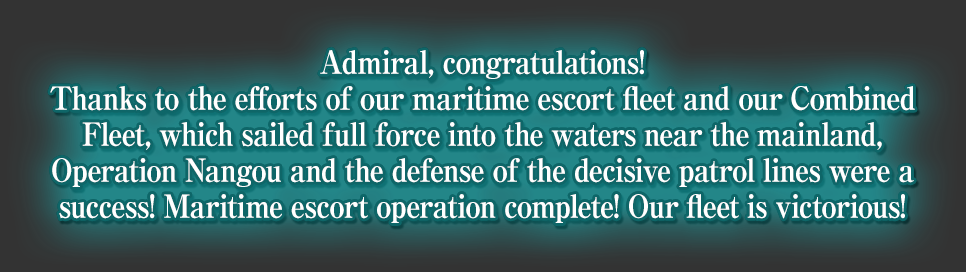
<style>
.page{position:relative;width:966px;height:272px}
.page>*{position:absolute;margin:0}
.t1{font:32px/36px "RyuminPro-ExBold";letter-spacing:-0.04em;color:#ffffff;scale:0.9 1}
</style>
<div class="page">
<p class="t1" style="left:50px;top:50px;width:865px;height:173px;text-align:center">Admiral, congratulations!<br>Thanks to the efforts of our maritime escort fleet and our Combined<br>Fleet, which sailed full force into the waters near the mainland,<br>Operation Nangou and the defense of the decisive patrol lines were a<br>success! Maritime escort operation complete! Our fleet is victorious!</p>
</div>
